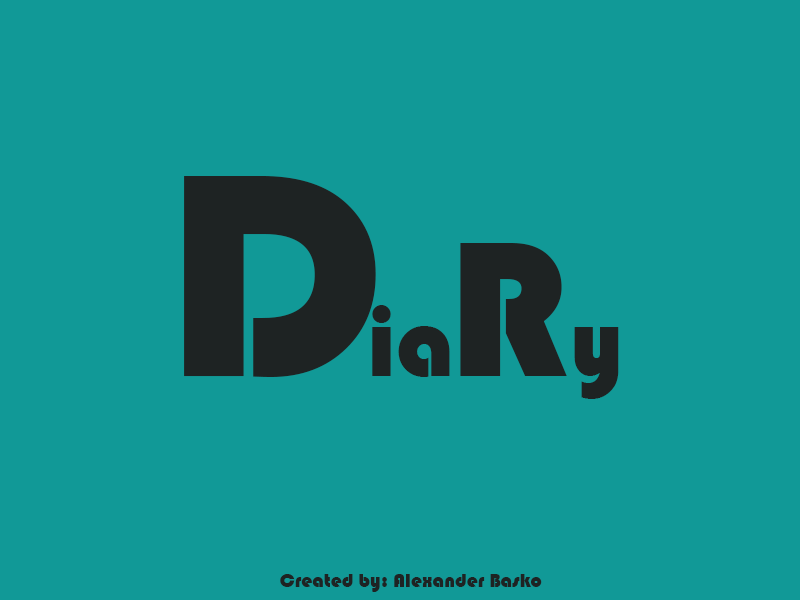
<style>
.page{position:relative;width:800px;height:600px;background:#119997}
.page>*{position:absolute;margin:0}
.t1{font:300px "Bauhaus93";color:#1e2323}
.t2{font:200px "Bauhaus93";color:#1e2323}
.t3{font:100px "Bauhaus93";color:#1e2323}
.t4{font:20px "Bauhaus93";color:#1e2323}
</style>
<div class="page">
<p class="t1" style="left:184px;top:176px;width:192px;height:201px">D</p>
<p class="t2" style="left:460px;top:243px;width:107px;height:133px">R</p>
<p class="t3" style="left:372px;top:305px;width:78px;height:72px">ia</p>
<p class="t3" style="left:574px;top:327px;width:45px;height:72px">y</p>
<p class="t4" style="left:280px;top:574px;width:262px;height:18px">Created by: Alexander Basko</p>
</div>
